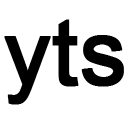
<style>
.page{position:relative;width:128px;height:128px;background:#ffffff}
.page>*{position:absolute;margin:0}
.t1{font:91.7px "ArialMT";color:#000000;font-weight:bold}
</style>
<div class="page">
<p class="t1" style="left:4px;top:19px;width:120px;height:86px">yts</p>
</div>
